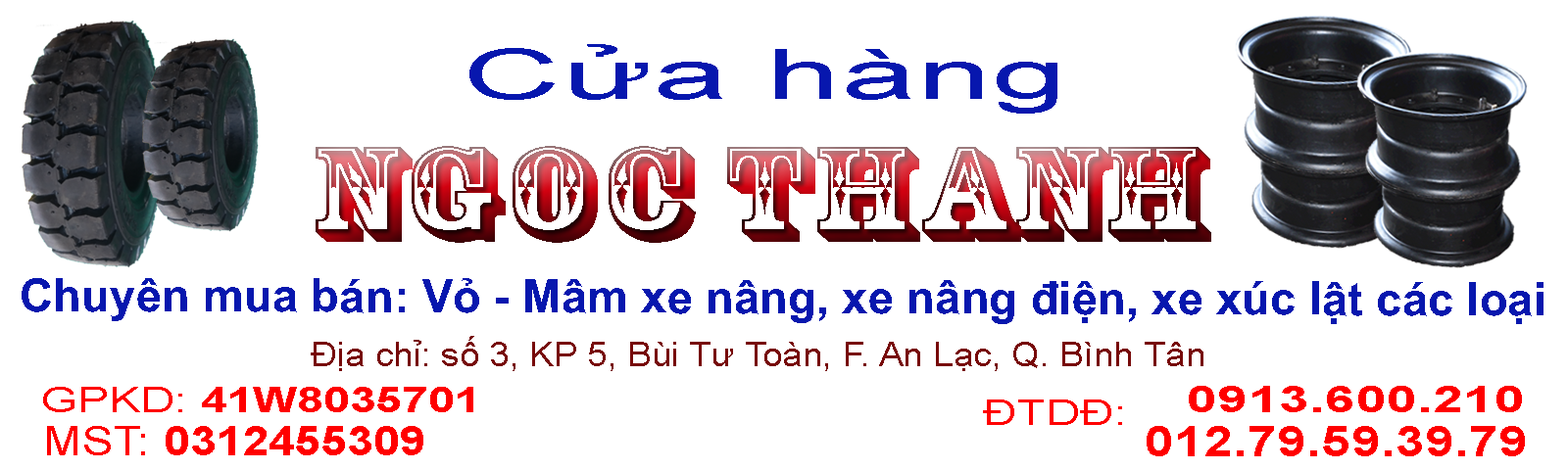
<style>
.page{position:relative;width:1568px;height:470px;background:#ffffff}
.page>*{position:absolute;margin:0}
.t1{font:69.6px "ArialMT";color:#0717ae;scale:1.95 1}
.t2{font:127.3px "RosewoodStd-Regular";scale:1.29 1}
.t3{font:46.4px "Arial-BoldMT";color:#0717ae}
.t4{font:33.8px "ArialMT";color:#770909;scale:1.07 1}
.t5{font:34.9px "Arial-BoldMT";color:#fe0000;scale:1.35 1}
.t6{font:34.9px "ArialMT";color:#fe0000;scale:1.35 1}
.t7{font:37.3px "Arial-BoldMT";color:#ff0000;scale:1.48 1}
.t8{font:34.8px "ArialMT";color:#ff0000;scale:1.35 1}
.t9{font:40.5px "Arial-BoldMT";color:#ff0000;scale:1.16 1}
.t10{font:40.5px "ArialMT";color:#ff0000;scale:1.16 1}
.t11{font:42.1px "Arial-BoldMT";color:#ff0000;scale:1.26 1}
</style>
<div class="page">
<p class="t1" style="left:469px;top:44px;width:588px;height:70px">Cửa hàng</p>
<p class="t2" style="left:316px;top:146px;width:895px;height:97px">NGoC THAnH</p>
<p class="t3" style="left:22px;top:278px;width:1522px;height:46px">Chuyên mua bán: Vỏ - Mâm xe nâng, xe nâng điện, xe xúc lật các loại</p>
<p class="t4" style="left:311px;top:336px;width:892px;height:35px">Địa chỉ: số 3, KP 5, Bùi Tư Toàn, F. An Lạc, Q. Bình Tân</p>
<p class="t5" style="left:43px;top:387px;width:430px;height:26px"><span class="t6">GPKD: </span>41W8035701</p>
<p class="t7" style="left:1189px;top:386px;width:333px;height:27px">0913.600.210</p>
<p class="t8" style="left:983px;top:400px;width:139px;height:25px">ĐTDĐ:</p>
<p class="t9" style="left:47px;top:426px;width:376px;height:30px"><span class="t10">MST: </span>0312455309</p>
<p class="t11" style="left:1147px;top:426px;width:378px;height:31px">012.79.59.39.79</p>
</div>
